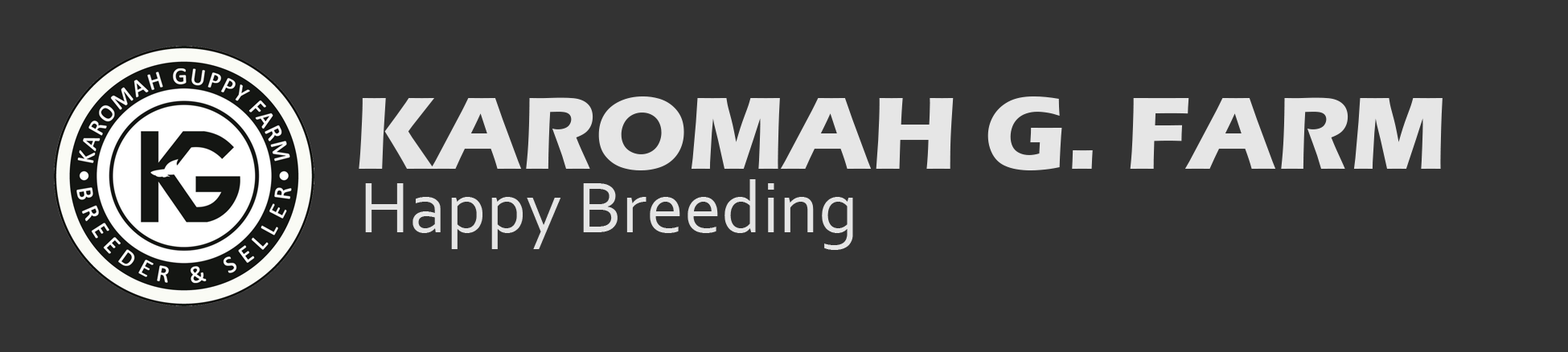
<style>
.page{position:relative;width:1568px;height:352px;background:#333333}
.page>*{position:absolute;margin:0}
.t1{font:105.9px "ErasITC-Bold";color:#e6e6e6;text-transform:uppercase}
.t2{font:75.2px "Corbel";color:#e5e5e5}
</style>
<div class="page">
<p class="t1" style="left:359px;top:96px;width:1084px;height:74px">KAROMAH G. FARM</p>
<p class="t2" style="left:365px;top:179px;width:488px;height:71px">Happy Breeding</p>
</div>
